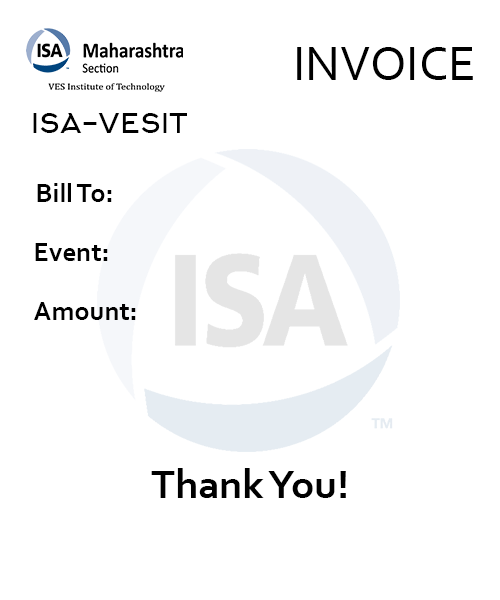
<style>
.page{position:relative;width:500px;height:600px;background:#ffffff}
.page>*{position:absolute;margin:0}
.t1{font:50px "Corbel";color:#000000}
.t2{font:27.1px "Arkhip";color:#000000}
.t3{font:27.1px "Corbel-Bold";color:#000000}
.t4{font:41.7px "Corbel-Bold";color:#000000}
</style>
<div class="page">
<p class="t1" style="left:297px;top:47px;width:176px;height:33px">INVOICE</p>
<p class="t2" style="left:33px;top:113px;width:154px;height:20px">ISA-VESIT</p>
<p class="t3" style="left:37px;top:183px;width:75px;height:19px">Bill To:</p>
<p class="t3" style="left:35px;top:243px;width:73px;height:18px">Event:</p>
<p class="t3" style="left:34px;top:302px;width:102px;height:18px">Amount:</p>
<p class="t4" style="left:151px;top:468px;width:195px;height:30px">Thank You!</p>
</div>
